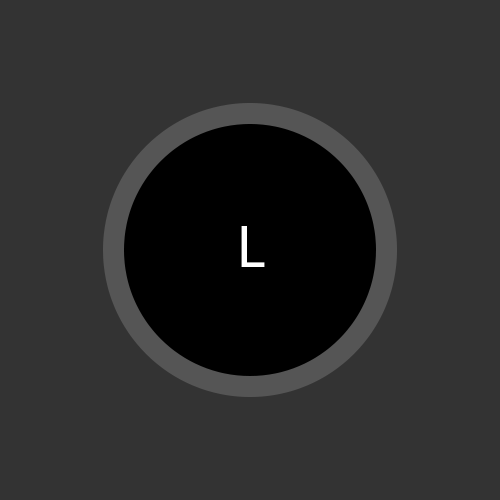
<style>
.page{position:relative;width:500px;height:500px;background:#333333}
.page>*{position:absolute;margin:0}
.t1{font:60px "MyriadPro-Regular";color:#ffffff}
</style>
<div class="page">
<p class="t1" style="left:241px;top:226px;width:24px;height:41px">L</p>
</div>
